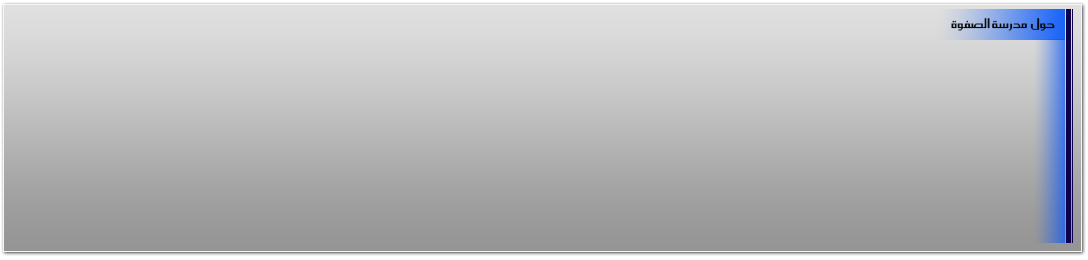
<style>
.page{position:relative;width:1088px;height:260px}
.page>*{position:absolute;margin:0}
.t1{font:16px "SC_KHALID";color:#0b0b0b}
</style>
<div class="page">
<p class="t1" style="left:951px;top:18px;width:104px;height:13px">حول  مدرسة الصفوة</p>
</div>
